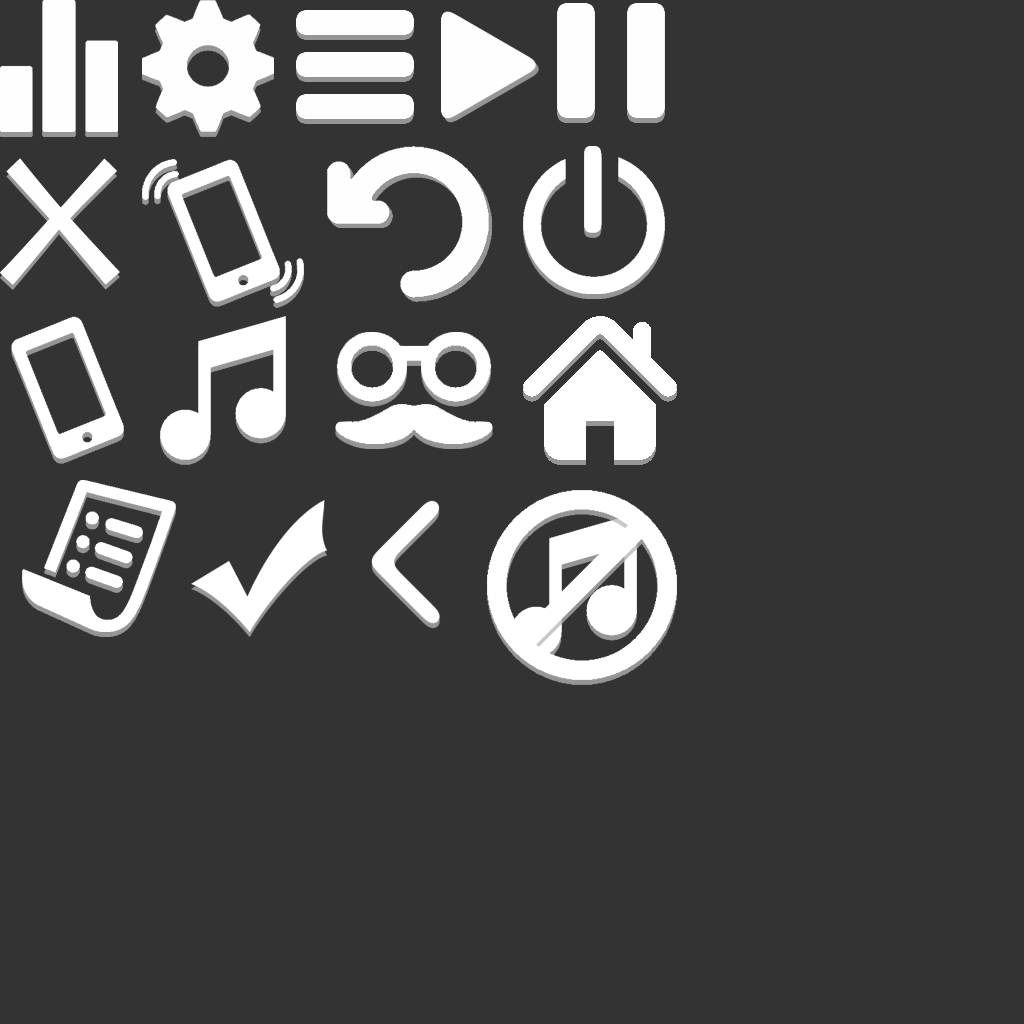
<style>
.page{position:relative;width:1024px;height:1024px;background:#333333}
.page>*{position:absolute;margin:0}
.t1{font:204.2px "LithosPro-Regular";color:#fefefe}
</style>
<div class="page">
<p class="t1" style="left:0px;top:158px;width:120px;height:127px">x</p>
</div>
